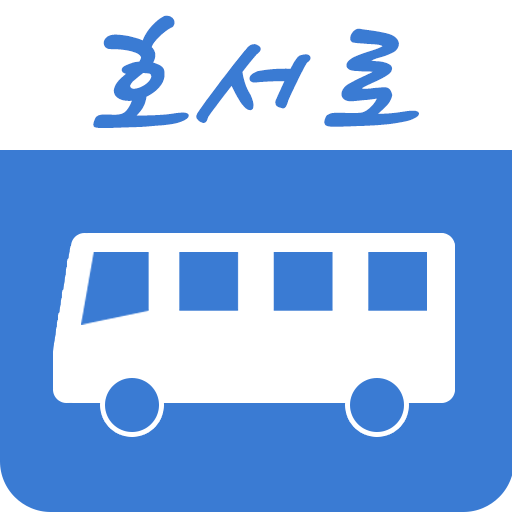
<style>
.page{position:relative;width:512px;height:512px;background:#3a7bd3}
.page>*{position:absolute;margin:0}
.t1{font:172.2px "HaanCjaB";color:#3a7bd3;font-weight:bold}
</style>
<div class="page">
<p class="t1" style="left:93px;top:15px;width:326px;height:113px">호서로</p>
</div>
